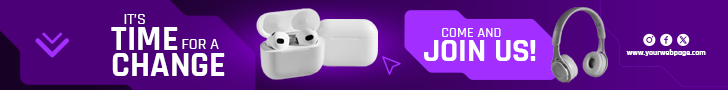
<style>
.page{position:relative;width:728px;height:90px}
.page>*{position:absolute;margin:0}
.t1{font:16px "Rajdhani-Medium";color:#ffffff}
.t2{font:34.9px "Rajdhani-Bold";color:#ffffff}
.t3{font:14.3px "Rajdhani-Medium";color:#ffffff}
.t4{font:32.7px "Rajdhani-Bold";color:#ffffff}
.t5{font:8px "Rajdhani-Bold";color:#ffffff}
</style>
<div class="page">
<p class="t1" style="left:124px;top:14px;width:21px;height:10px">IT’S</p>
<p class="t2" style="left:111px;top:27px;width:67px;height:23px">TIME</p>
<p class="t3" style="left:442px;top:28px;width:59px;height:9px">COME AND</p>
<p class="t1" style="left:182px;top:39px;width:37px;height:10px">FOR A</p>
<p class="t4" style="left:424px;top:40px;width:112px;height:21px">JOIN US!</p>
<p class="t2" style="left:112px;top:53px;width:113px;height:23px">CHANGE</p>
<p class="t5" style="left:626px;top:49px;width:80px;height:7px">www.yourwebpage.com</p>
</div>
